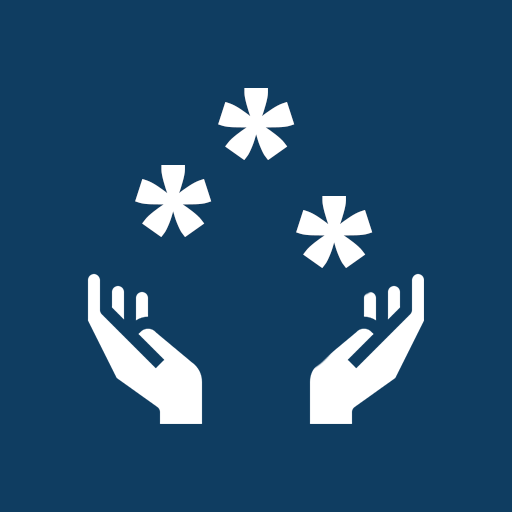
<style>
.page{position:relative;width:512px;height:512px;background:#0f3d61}
.page>*{position:absolute;margin:0}
.t1{font:180px "Ubuntu-Bold";letter-spacing:0.1em;color:#ffffff}
</style>
<div class="page">
<p class="t1" style="left:218px;top:88px;width:77px;height:72px">*</p>
<p class="t1" style="left:135px;top:165px;width:77px;height:72px">*</p>
<p class="t1" style="left:296px;top:196px;width:77px;height:72px">*</p>
</div>
